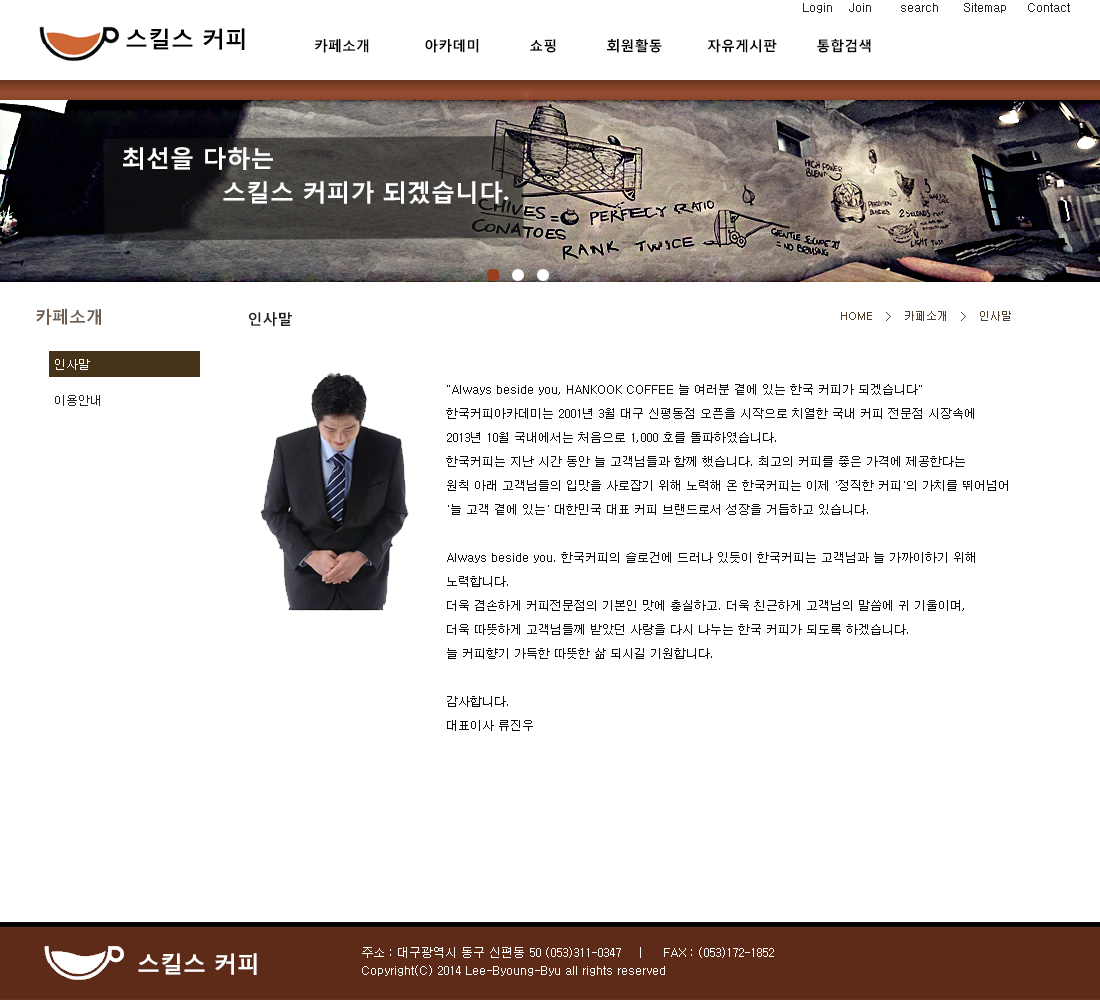
<style>
.page{position:relative;width:1100px;height:1000px;background:#ffffff}
.page>*{position:absolute;margin:0}
.t1{font:12px "Dotum";color:#222222}
.t2{font:23px "MalgunGothicBold";color:#000000}
.t3{font:14px "MalgunGothicBold";color:#000000}
.t4{font:24px "MalgunGothicBold";color:#ffffff}
.t5{font:17px "MalgunGothicBold";color:#715f52}
.t6{font:15px "MalgunGothicBold";color:#212121}
.t7{font:11px "Dotum";color:#4f3d27}
.t8{font:12px "Dotum";color:#ffffff}
.t9{font:12px/24px "Dotum";color:#0d0d0d}
.t10{font:12px "Dotum";color:#212121}
.t11{font:23px "MalgunGothicBold";color:#ffffff}
.t12{font:12px/18px "Dotum";color:#ffffff}
</style>
<div class="page">
<p class="t1" style="left:803px;top:3px;width:267px;height:10px">Login    Join       search      Sitemap     Contact</p>
<p class="t2" style="left:126px;top:28px;width:119px;height:22px">스킬스 커피</p>
<p class="t3" style="left:315px;top:39px;width:556px;height:14px">카페소개           아카데미          쇼핑          회원활동         자유게시판        통합검색</p>
<p class="t4" style="left:123px;top:147px;width:150px;height:23px">최선을 다하는</p>
<p class="t4" style="left:223px;top:181px;width:286px;height:23px">스킬스 커피가 되겠습니다.</p>
<p class="t5" style="left:36px;top:308px;width:65px;height:17px">카페소개</p>
<p class="t6" style="left:249px;top:312px;width:43px;height:15px">인사말</p>
<p class="t7" style="left:841px;top:311px;width:170px;height:10px">HOME   &gt;   카페소개   &gt;   인사말</p>
<p class="t8" style="left:55px;top:359px;width:35px;height:11px">인사말</p>
<p class="t9" style="left:446px;top:384px;width:562px;height:347px">"Always beside you, HANKOOK COFFEE 늘 여러분 곁에 있는 한국 커피가 되겠습니다"<br>한국커피아카데미는 2001년 3월 대구 신평동점 오픈을 시작으로 치열한 국내 커피 전문점 시장속에<br>2013년 10월 국내에서는 처음으로 1,000 호를 돌파하였습니다.<br>한국커피는 지난 시간 동안 늘 고객님들과 함께 했습니다. 최고의 커피를 좋은 가격에 제공한다는<br>원칙 아래 고객님들의 입맛을 사로잡기 위해 노력해 온 한국커피는 이제 '정직한 커피'의 가치를 뛰어넘어<br>'늘 고객 곁에 있는' 대한민국 대표 커피 브랜드로서 성장을 거듭하고 있습니다.<br><br>Always beside you. 한국커피의 슬로건에 드러나 있듯이 한국커피는 고객님과 늘 가까이하기 위해 <br>노력합니다.<br>더욱 겸손하게 커피전문점의 기본인 맛에 충실하고. 더욱 친근하게 고객님의 말씀에 귀 기울이며,<br>더욱 따뜻하게 고객님들께 받았던 사랑을 다시 나누는 한국 커피가 되도록 하겠습니다.<br>늘 커피향기 가득한 따뜻한 삶 되시길 기원합니다.<br><br>감사합니다.<br>대표이사 류진우</p>
<p class="t10" style="left:55px;top:395px;width:45px;height:11px">이용안내</p>
<p class="t11" style="left:138px;top:953px;width:119px;height:22px">스킬스 커피</p>
<p class="t12" style="left:362px;top:947px;width:412px;height:29px">주소 : 대구광역시 동구 신편동 50 (053)311-0347    |     FAX : (053)172-1852<br>Copyright(C) 2014 Lee-Byoung-Byu all rights reserved</p>
</div>
